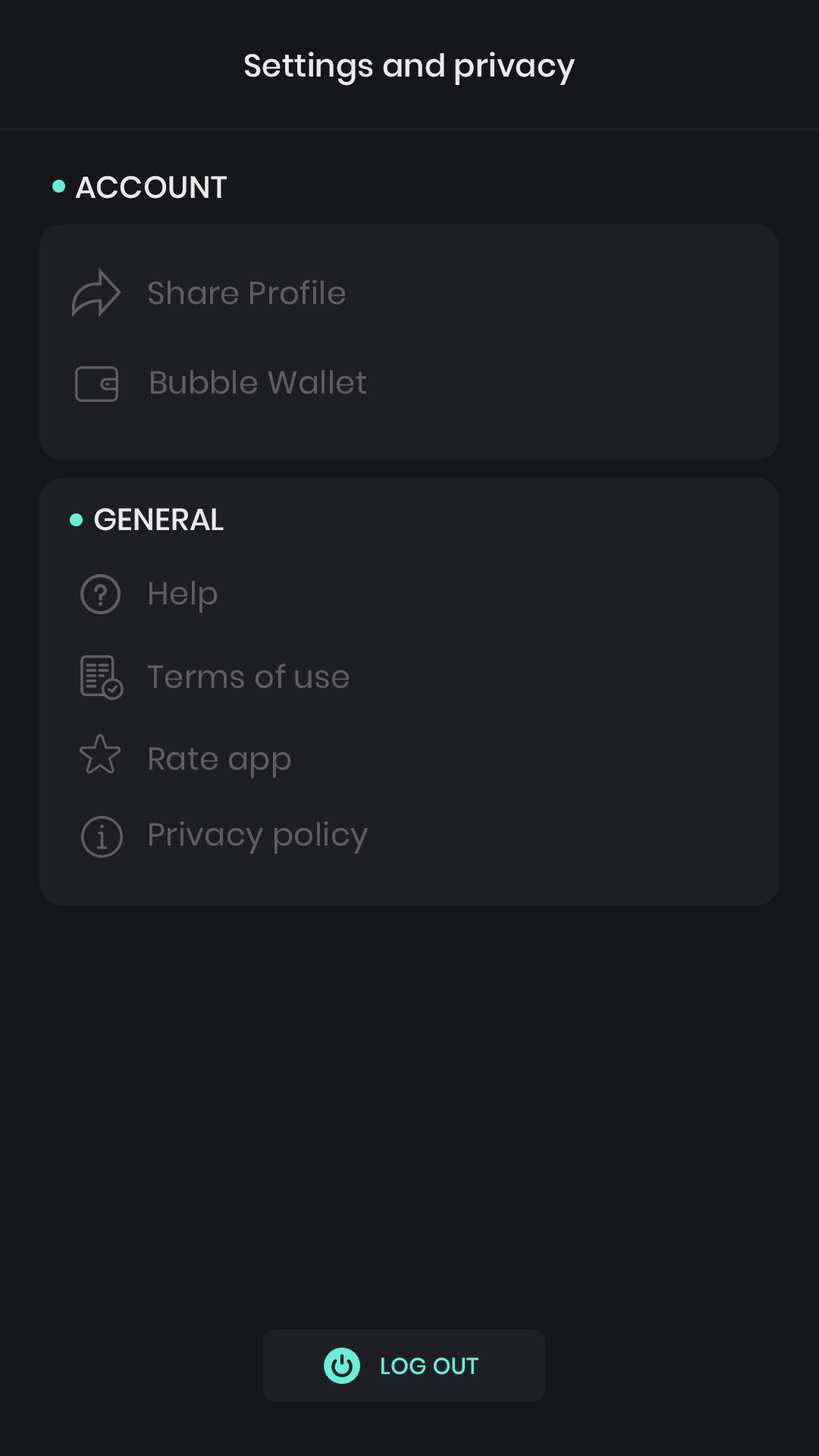
<style>
.page{position:relative;width:819px;height:1456px;background:#15161a}
.page>*{position:absolute;margin:0}
.t1{font:31.6px "Poppins-Medium";letter-spacing:0.01em;color:#eaeaea}
.t2{font:30.6px "Poppins-Medium";letter-spacing:0.01em;color:#eaeaea}
.t3{font:31.6px "Poppins-Regular";letter-spacing:0.01em;color:#5f5f5f}
.t4{font:23px "Poppins-Medium";letter-spacing:0.01em;color:#67efd7}
</style>
<div class="page">
<p class="t1" style="left:245px;top:52px;width:330px;height:34px">Settings and privacy</p>
<p class="t2" style="left:75px;top:176px;width:152px;height:23px">ACCOUNT</p>
<p class="t3" style="left:149px;top:280px;width:196px;height:25px">Share Profile</p>
<p class="t3" style="left:151px;top:370px;width:215px;height:24px">Bubble Wallet</p>
<p class="t2" style="left:94px;top:508px;width:130px;height:23px">GENERAL</p>
<p class="t3" style="left:149px;top:581px;width:69px;height:32px">Help</p>
<p class="t3" style="left:147px;top:664px;width:202px;height:25px">Terms of use</p>
<p class="t3" style="left:149px;top:747px;width:142px;height:31px">Rate app</p>
<p class="t3" style="left:149px;top:821px;width:220px;height:33px">Privacy policy</p>
<p class="t4" style="left:381px;top:1357px;width:98px;height:18px">LOG OUT</p>
</div>
